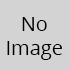
<style>
.page{position:relative;width:70px;height:70px;background:#d3d3d3}
.page>*{position:absolute;margin:0}
.t1{font:20px "OpenSans";color:#000000}
</style>
<div class="page">
<p class="t1" style="left:7px;top:17px;width:55px;height:43px;text-align:center">No<br>Image</p>
</div>
